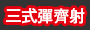
<style>
.page{position:relative;width:90px;height:30px;background:#333333}
.page>*{position:absolute;margin:0}
.t1{font:16px "GothicMB101Pr6N-Medium";color:#ffffff}
</style>
<div class="page">
<p class="t1" style="left:6px;top:8px;width:79px;height:16px">三式彈齊射</p>
</div>
